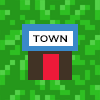
<style>
.page{position:relative;width:100px;height:100px;background:#25981b}
.page>*{position:absolute;margin:0}
.t1{font:10px "CopperplateGothic-Bold";color:#000000}
</style>
<div class="page">
<p class="t1" style="left:33px;top:35px;width:35px;height:7px">TOWN</p>
</div>
